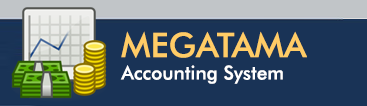
<style>
.page{position:relative;width:367px;height:106px;background:#193356}
.page>*{position:absolute;margin:0}
.t1{font:33.8px "FuturaBT-Medium";color:#ffcc66}
.t2{font:19.2px "FuturaBT-Medium";color:#ffffff}
</style>
<div class="page">
<p class="t1" style="left:121px;top:31px;width:186px;height:27px">MEGATAMA</p>
<p class="t2" style="left:120px;top:65px;width:163px;height:19px">Accounting System</p>
</div>
